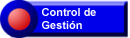
<style>
.page{position:relative;width:130px;height:38px;background:#0000ea}
.page>*{position:absolute;margin:0}
.t1{font:11px "Arial-BoldMT";color:#ffffff}
</style>
<div class="page">
<p class="t1" style="left:42px;top:8px;width:54px;height:21px">Control de Gestión</p>
</div>
